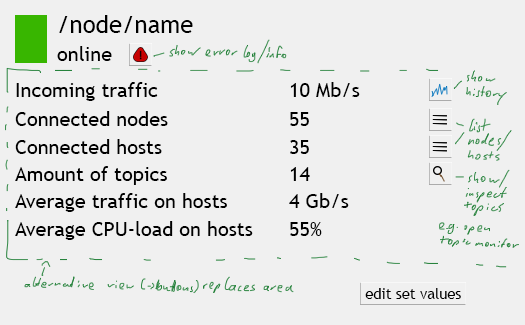
<style>
.page{position:relative;width:525px;height:325px;background:#f0f0f0}
.page>*{position:absolute;margin:0}
.t1{font:24px "TrebuchetMS";color:#000000}
.t2{font:20px "TrebuchetMS";color:#000000}
.t3{font:14.7px "TrebuchetMS";color:#000000}
</style>
<div class="page">
<p class="t1" style="left:59px;top:15px;width:134px;height:18px">/node/name</p>
<p class="t2" style="left:57px;top:46px;width:55px;height:15px">online</p>
<p class="t2" style="left:16px;top:82px;width:142px;height:19px">Incoming traffic</p>
<p class="t2" style="left:290px;top:82px;width:70px;height:15px">10 Mb/s</p>
<p class="t2" style="left:15px;top:111px;width:153px;height:15px">Connected nodes</p>
<p class="t2" style="left:290px;top:112px;width:19px;height:14px">55</p>
<p class="t2" style="left:15px;top:139px;width:147px;height:15px">Connected hosts</p>
<p class="t2" style="left:290px;top:140px;width:19px;height:14px">35</p>
<p class="t2" style="left:15px;top:166px;width:152px;height:19px">Amount of topics</p>
<p class="t2" style="left:290px;top:167px;width:20px;height:14px">14</p>
<p class="t2" style="left:15px;top:193px;width:212px;height:19px">Average traffic on hosts</p>
<p class="t2" style="left:289px;top:193px;width:60px;height:15px">4 Gb/s</p>
<p class="t2" style="left:15px;top:221px;width:238px;height:19px">Average CPU-load on hosts</p>
<p class="t2" style="left:290px;top:222px;width:32px;height:14px">55%</p>
<p class="t3" style="left:365px;top:288px;width:96px;height:11px">edit set values</p>
</div>
